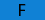
<style>
.page{position:relative;width:45px;height:20px;background:#1081d5}
.page>*{position:absolute;margin:0}
.t1{font:16.7px "MyriadPro-Regular";color:#000000}
</style>
<div class="page">
<p class="t1" style="left:19px;top:4px;width:7px;height:12px">F</p>
</div>
